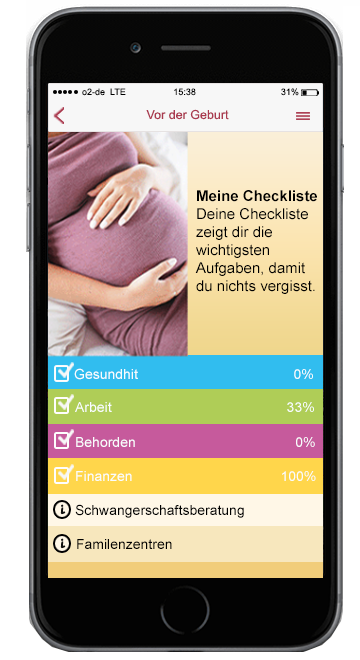
<style>
.page{position:relative;width:360px;height:660px}
.page>*{position:absolute;margin:0}
.t1{font:9px "ArialMT";color:#000000}
.t2{font:12.5px "ArialMT";color:#aa3a4f}
.t3{font:15px "ArialMT";color:#000000}
.t4{font:15px "Arial-BoldMT";color:#000000}
.t5{font:14px "ArialMT";color:#f9fdfe}
.t6{font:18px "HarlowSolid";color:#10100f}
.t7{font:14px "ArialMT";color:#000000}
</style>
<div class="page">
<p class="t1" style="left:82px;top:88px;width:217px;height:8px">o2-de  LTE                   15:38                                  31%</p>
<p class="t2" style="left:146px;top:109px;width:83px;height:11px">Vor der Geburt</p>
<p class="t3" style="left:195px;top:190px;width:122px;height:104px"><span class="t4">Meine Checkliste<br></span>Deine Checkliste<br>zeigt dir die<br>wichtigsten<br>Aufgaben, damit<br>du nichts vergisst.</p>
<p class="t5" style="left:74px;top:368px;width:239px;height:12px">Gesundhit                                        0%</p>
<p class="t5" style="left:75px;top:402px;width:239px;height:10px">Arbeit                                             33%</p>
<p class="t5" style="left:76px;top:437px;width:239px;height:10px">Behorden                                         0%</p>
<p class="t5" style="left:76px;top:471px;width:240px;height:10px">Finanzen                                      100%</p>
<p class="t6" style="left:60px;top:504px;width:6px;height:11px;rotate:-18deg">i</p>
<p class="t7" style="left:75px;top:504px;width:169px;height:14px">Schwangerschaftsberatung</p>
<p class="t6" style="left:60px;top:538px;width:6px;height:11px;rotate:-18deg">i</p>
<p class="t7" style="left:77px;top:539px;width:95px;height:10px">Familenzentren</p>
</div>
